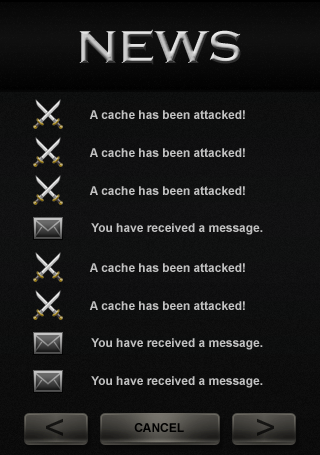
<style>
.page{position:relative;width:320px;height:455px}
.page>*{position:absolute;margin:0}
.t1{font:47.8px "CopperplateGothic-Bold"}
.t2{font:12px "Arial-BoldMT";color:#c1c1c1}
.t3{font:12px "Arial-BoldMT";color:#000000}
</style>
<div class="page">
<p class="t1" style="left:79px;top:29px;width:162px;height:36px">NEWS</p>
<p class="t2" style="left:89px;top:110px;width:156px;height:9px">A cache has been attacked!</p>
<p class="t2" style="left:89px;top:148px;width:156px;height:9px">A cache has been attacked!</p>
<p class="t2" style="left:89px;top:186px;width:156px;height:9px">A cache has been attacked!</p>
<p class="t2" style="left:91px;top:223px;width:172px;height:12px">You have received a message.</p>
<p class="t2" style="left:89px;top:263px;width:156px;height:9px">A cache has been attacked!</p>
<p class="t2" style="left:89px;top:301px;width:156px;height:9px">A cache has been attacked!</p>
<p class="t2" style="left:91px;top:338px;width:172px;height:12px">You have received a message.</p>
<p class="t2" style="left:91px;top:376px;width:172px;height:12px">You have received a message.</p>
<p class="t3" style="left:134px;top:423px;width:50px;height:9px">CANCEL</p>
</div>
